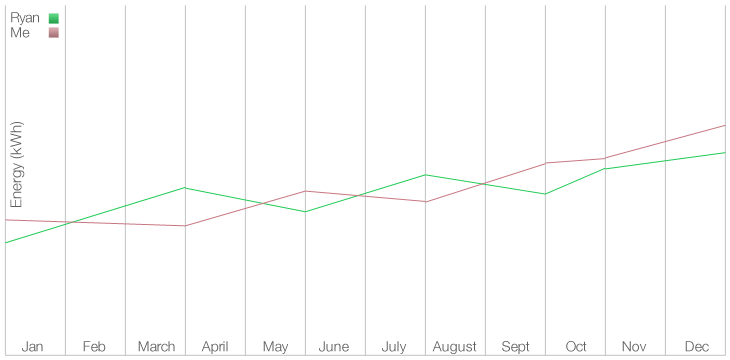
<style>
.page{position:relative;width:730px;height:360px;background:#ffffff}
.page>*{position:absolute;margin:0}
.t1{font:14px "HelveticaNeue-Light";color:#5f5f5f}
.t2{font:15px "HelveticaNeue-Light";color:#5f5f5f}
.t3{font:14px "HelveticaNeue-Light"}
</style>
<div class="page">
<p class="t1" style="left:11px;top:12px;width:28px;height:13px">Ryan</p>
<p class="t1" style="left:11px;top:27px;width:19px;height:11px">Me</p>
<p class="t2" style="left:10px;top:122px;width:15px;height:85px;rotate:-90deg">Energy (kWh)</p>
<p class="t1" style="left:22px;top:341px;width:21px;height:11px">Jan</p>
<p class="t1" style="left:83px;top:341px;width:23px;height:11px">Feb</p>
<p class="t1" style="left:138px;top:341px;width:37px;height:11px">March</p>
<p class="t1" style="left:201px;top:341px;width:27px;height:13px">April</p>
<p class="t1" style="left:263px;top:341px;width:26px;height:13px">May</p>
<p class="t3" style="left:319px;top:341px;width:30px;height:11px">June</p>
<p class="t3" style="left:382px;top:341px;width:25px;height:13px">July</p>
<p class="t1" style="left:432px;top:341px;width:45px;height:13px">August</p>
<p class="t1" style="left:502px;top:341px;width:28px;height:13px">Sept</p>
<p class="t1" style="left:566px;top:341px;width:21px;height:11px">Oct</p>
<p class="t1" style="left:622px;top:341px;width:25px;height:11px">Nov</p>
<p class="t1" style="left:685px;top:341px;width:24px;height:11px">Dec</p>
</div>
